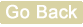
<style>
.page{position:relative;width:83px;height:27px;background:#d9d3a4}
.page>*{position:absolute;margin:0}
.t1{font:18px "ArialMT";color:#ffffff;font-weight:bold}
</style>
<div class="page">
<p class="t1" style="left:6px;top:4px;width:72px;height:15px">Go Back</p>
</div>
